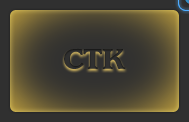
<style>
.page{position:relative;width:189px;height:122px;background:#303030}
.page>*{position:absolute;margin:0}
.t1{font:32px "UsherwoodStd-Black";color:#303030}
</style>
<div class="page">
<p class="t1" style="left:64px;top:48px;width:62px;height:21px">CTK</p>
</div>
